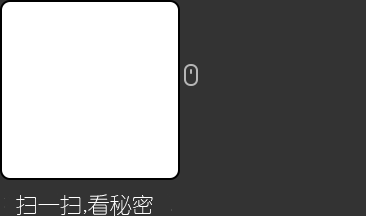
<style>
.page{position:relative;width:366px;height:216px;background:#333333}
.page>*{position:absolute;margin:0}
.t1{font:22.2px "Tensentype-JiaLiChaoXiYuanJ";color:#ffffff}
</style>
<div class="page">
<p class="t1" style="left:16px;top:194px;width:137px;height:22px">扫一扫,看秘密</p>
</div>
